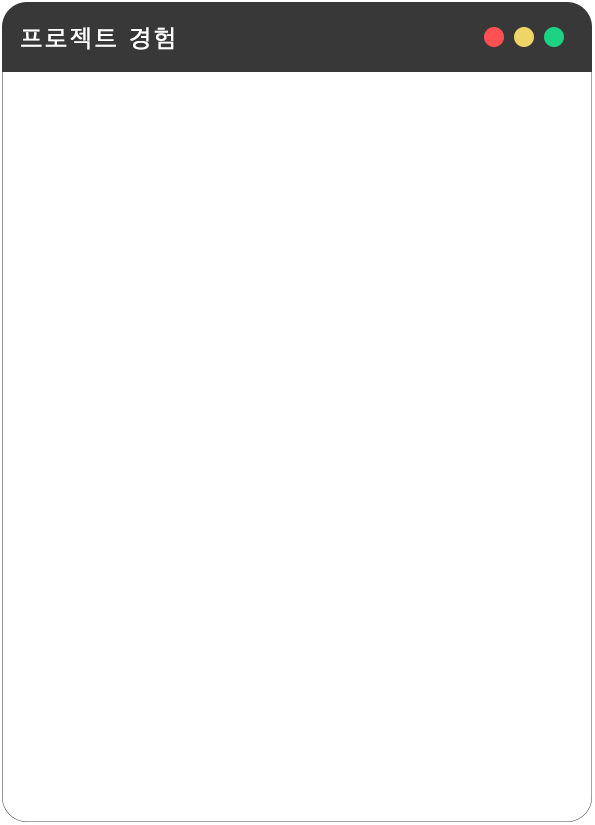
<style>
.page{position:relative;width:595px;height:825px;background:#ffffff}
.page>*{position:absolute;margin:0}
.t1{font:25px "AppleSDGothicNeoL00";letter-spacing:0.1em;color:#ffffff;font-variant:small-caps;font-weight:bold}
</style>
<div class="page">
<p class="t1" style="left:21px;top:27px;width:153px;height:23px">프로젝트 경험</p>
</div>
